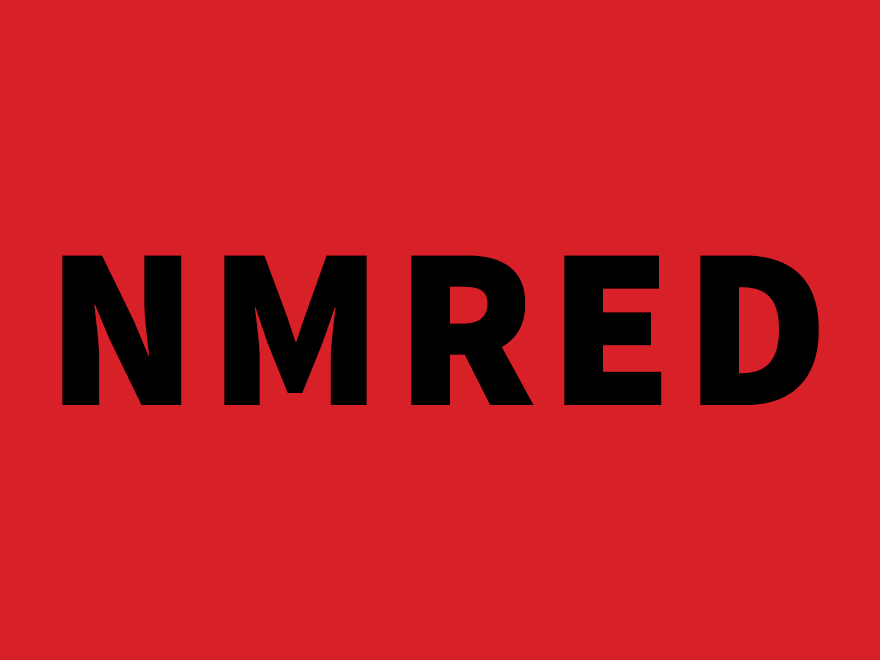
<style>
.page{position:relative;width:880px;height:660px;background:#d82029}
.page>*{position:absolute;margin:0}
.t1{font:230px "SourceSansPro-Black";letter-spacing:0.05em;color:#000000;text-transform:uppercase}
</style>
<div class="page">
<p class="t1" style="left:62px;top:255px;width:757px;height:150px">NMRED</p>
</div>
